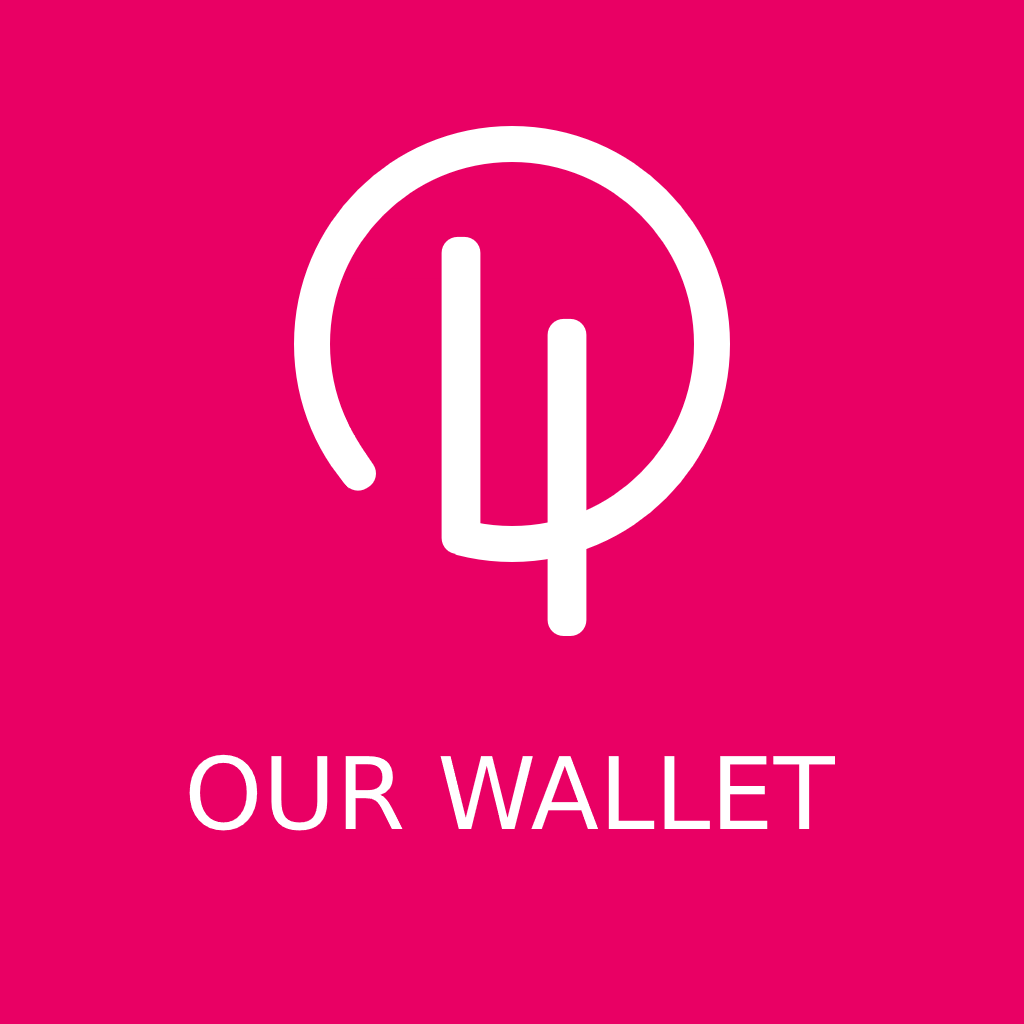
<style>
.page{position:relative;width:1024px;height:1024px;background:#e90064}
.page>*{position:absolute;margin:0}
.t1{font:100px "DejaVuSans";color:#ffffff}
</style>
<div class="page">
<p class="t1" style="left:189px;top:754px;width:646px;height:77px">OUR WALLET</p>
</div>
